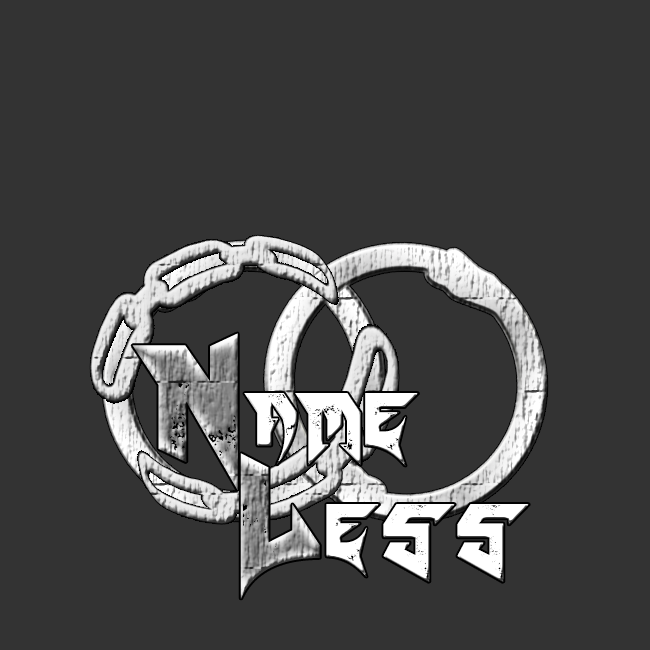
<style>
.page{position:relative;width:650px;height:650px;background:#333333}
.page>*{position:absolute;margin:0}
.t1{font:200px "Blade";color:#ffffff}
</style>
<div class="page">
<p class="t1" style="left:244px;top:393px;width:174px;height:73px">ame</p>
<p class="t1" style="left:326px;top:504px;width:203px;height:78px">ess</p>
</div>
